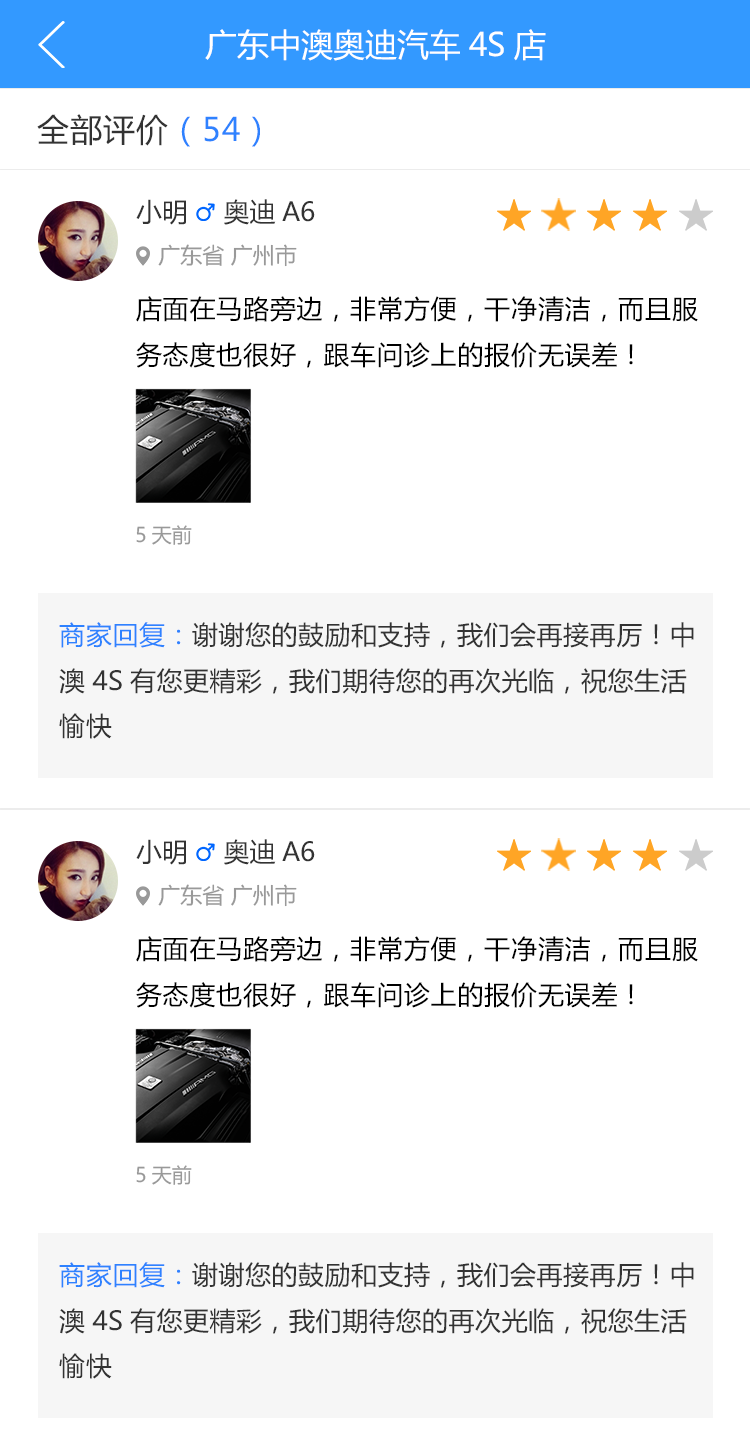
<style>
.page{position:relative;width:750px;height:1447px;background:#ffffff}
.page>*{position:absolute;margin:0}
.t1{font:32px "MicrosoftYaHei";color:#ffffff}
.t2{font:32px "MicrosoftYaHei";letter-spacing:0.03em;color:#333333}
.t3{font:32px "MicrosoftYaHei";letter-spacing:0.03em;color:#2e82ff}
.t4{font:26px "MicrosoftYaHei";color:#333333}
.t5{font:22px "MicrosoftYaHei";color:#999999}
.t6{font:26px "MicrosoftYaHei";letter-spacing:0.03em;color:#000000}
.t7{font:20px "MicrosoftYaHei";color:#999999}
.t8{font:26px "MicrosoftYaHei";letter-spacing:0.02em;color:#333333}
.t9{font:26px "MicrosoftYaHei";letter-spacing:0.02em;color:#2e82ff}
</style>
<div class="page">
<p class="t1" style="left:205px;top:29px;width:341px;height:32px">广东中澳奥迪汽车4S店</p>
<p class="t2" style="left:37px;top:114px;width:223px;height:33px">全部评价<span class="t3">（54）</span></p>
<p class="t4" style="left:136px;top:199px;width:50px;height:26px">小明</p>
<p class="t4" style="left:224px;top:199px;width:91px;height:26px">奥迪A6</p>
<p class="t5" style="left:158px;top:244px;width:139px;height:23px">广东省 广州市</p>
<p class="t6" style="left:136px;top:296px;width:562px;height:72px">店面在马路旁边，非常方便，干净清洁，而且服务态度也很好，跟车问诊上的报价无误差！</p>
<p class="t7" style="left:136px;top:525px;width:56px;height:20px">5天前</p>
<p class="t8" style="left:59px;top:622px;width:635px;height:117px"><span class="t9">商家回复：</span>谢谢您的鼓励和支持，我们会再接再厉！中澳4S有您更精彩，我们期待您的再次光临，祝您生活愉快</p>
<p class="t4" style="left:136px;top:839px;width:50px;height:26px">小明</p>
<p class="t4" style="left:224px;top:839px;width:91px;height:26px">奥迪A6</p>
<p class="t5" style="left:158px;top:884px;width:139px;height:23px">广东省 广州市</p>
<p class="t6" style="left:136px;top:936px;width:562px;height:72px">店面在马路旁边，非常方便，干净清洁，而且服务态度也很好，跟车问诊上的报价无误差！</p>
<p class="t7" style="left:136px;top:1165px;width:56px;height:20px">5天前</p>
<p class="t8" style="left:59px;top:1262px;width:635px;height:117px"><span class="t9">商家回复：</span>谢谢您的鼓励和支持，我们会再接再厉！中澳4S有您更精彩，我们期待您的再次光临，祝您生活愉快</p>
</div>
